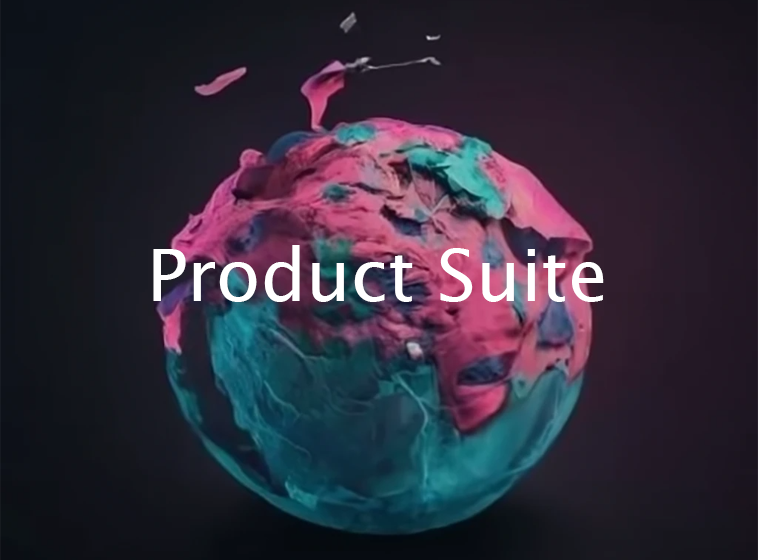
<style>
.page{position:relative;width:758px;height:560px}
.page>*{position:absolute;margin:0}
.t1{font:72px "LucidaSans";color:#ffffff}
</style>
<div class="page">
<p class="t1" style="left:153px;top:245px;width:451px;height:57px">Product Suite</p>
</div>
